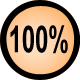
<style>
.page{position:relative;width:80px;height:80px;background:#000000}
.page>*{position:absolute;margin:0}
.t1{font:37.1px "Arial-BoldMT";color:#000000;scale:0.64 1}
</style>
<div class="page">
<p class="t1" style="left:10px;top:25px;width:58px;height:29px">100%</p>
</div>
